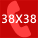
<style>
.page{position:relative;width:38px;height:38px;background:#c50606}
.page>*{position:absolute;margin:0}
.t1{font:12px "SegoeWP-Semibold";letter-spacing:0.025em;color:#ffffff;text-transform:uppercase}
</style>
<div class="page">
<p class="t1" style="left:2px;top:14px;width:35px;height:10px">38x38</p>
</div>
